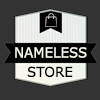
<style>
.page{position:relative;width:100px;height:100px;background:#333333}
.page>*{position:absolute;margin:0}
.t1{font:13.8px "Verdana";color:#f8f7ec}
.t2{font:13.7px "Verdana";color:#000000}
</style>
<div class="page">
<p class="t1" style="left:15px;top:47px;width:72px;height:11px">NAMELESS</p>
<p class="t2" style="left:27px;top:66px;width:46px;height:12px">STORE</p>
</div>
